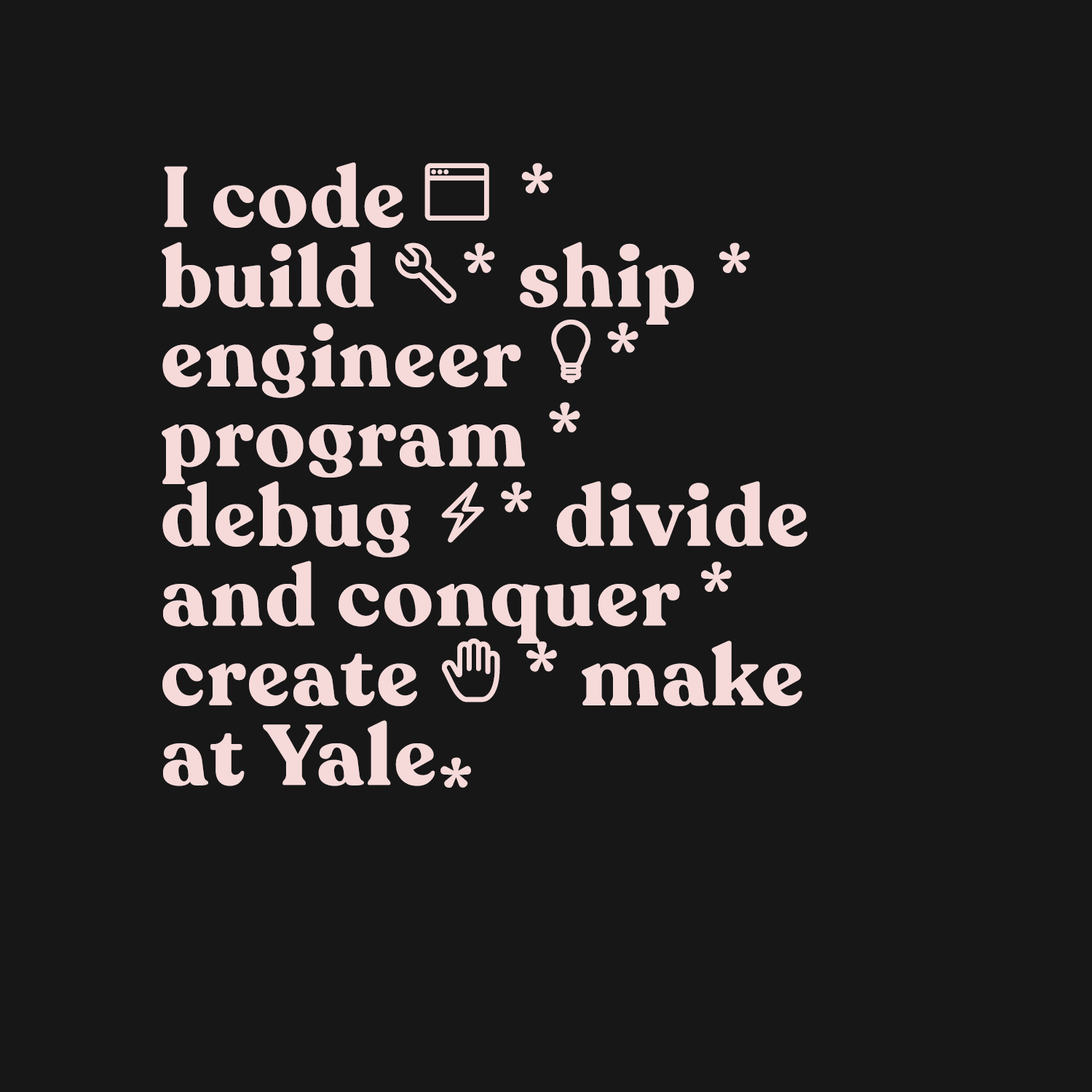
<style>
.page{position:relative;width:1092px;height:1092px;background:#171717}
.page>*{position:absolute;margin:0}
.t1{font:84.9px/79.7px "Recoleta-Bold";letter-spacing:0.025em;color:#f6dada}
.t2{font:61.6px/79.7px "Linearicons";letter-spacing:0.025em;color:#f6dada;font-weight:bold}
</style>
<div class="page">
<p class="t1" style="left:162px;top:162px;width:645px;height:626px">I code <span class="t2">program </span>*<br>build <span class="t2">wrench</span>* ship *<br>engineer <span class="t2">light</span>*<br>program * <br>debug <span class="t2">lightning</span>* divide<br>and conquer *<br>create <span class="t2">hand</span> * make <br>at Yale*</p>
</div>
